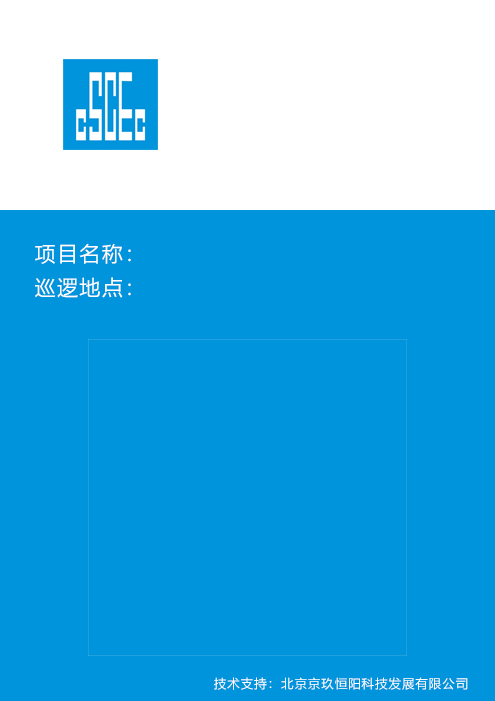
<style>
.page{position:relative;width:495px;height:701px;background:#0094dc}
.page>*{position:absolute;margin:0}
.t1{font:20.8px "MicrosoftYaHei";letter-spacing:0.075em;color:#ffffff}
.t2{font:12.5px "MicrosoftYaHei";letter-spacing:0.075em;color:#ffffff}
</style>
<div class="page">
<p class="t1" style="left:35px;top:243px;width:96px;height:21px">项目名称：</p>
<p class="t1" style="left:35px;top:277px;width:96px;height:21px">巡逻地点：</p>
<p class="t2" style="left:214px;top:677px;width:254px;height:13px">技术支持：北京京玖恒阳科技发展有限公司</p>
</div>
